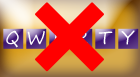
<style>
.page{position:relative;width:140px;height:77px;background:#ff0000}
.page>*{position:absolute;margin:0}
.t1{font:17.9px "SegoePrint";color:#ffffff}
</style>
<div class="page">
<p class="t1" style="left:6px;top:30px;width:13px;height:18px">Q</p>
<p class="t1" style="left:121px;top:30px;width:14px;height:15px">Y</p>
<p class="t1" style="left:27px;top:31px;width:18px;height:14px">W</p>
<p class="t1" style="left:98px;top:31px;width:15px;height:14px">T</p>
</div>
